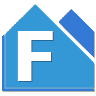
<style>
.page{position:relative;width:96px;height:96px;background:#3497d6}
.page>*{position:absolute;margin:0}
.t1{font:71.7px "SegoeUI-Bold";color:#fefeff;scale:1.2 1}
</style>
<div class="page">
<p class="t1" style="left:17px;top:31px;width:36px;height:50px">F</p>
</div>
